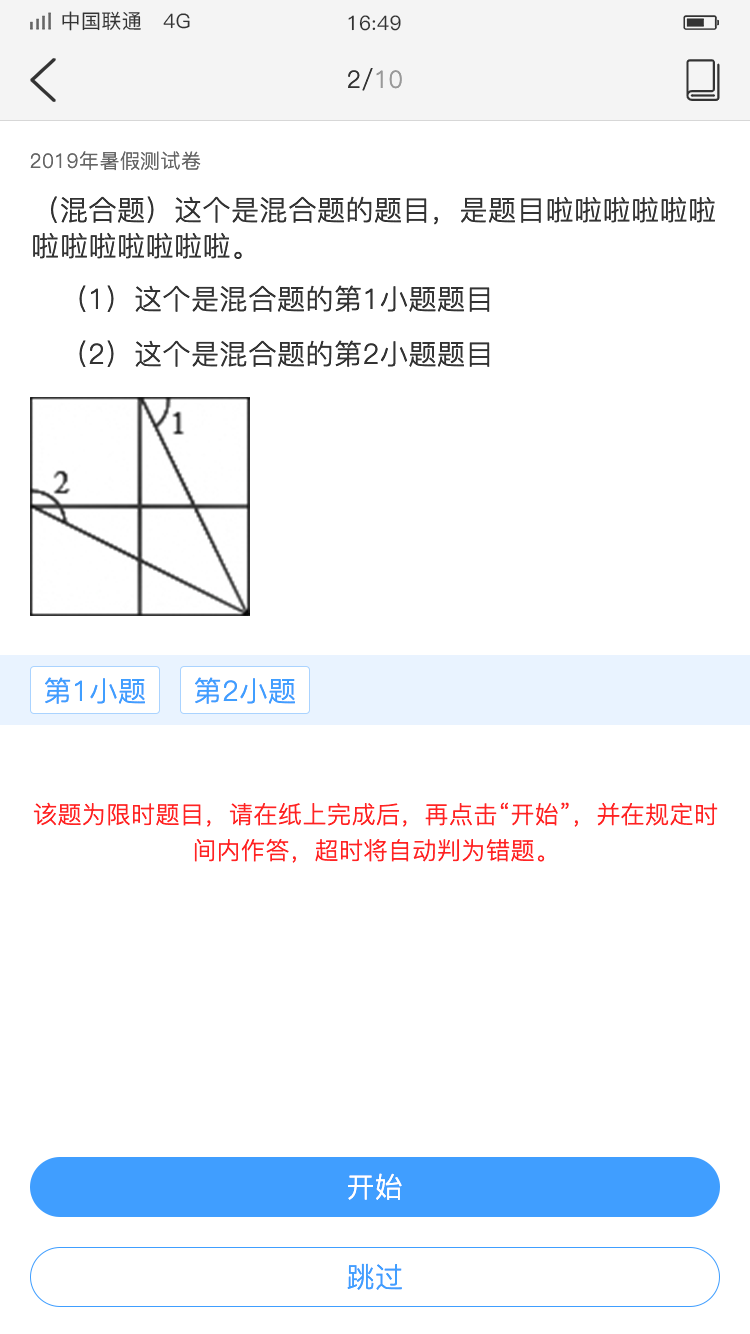
<style>
.page{position:relative;width:750px;height:1334px;background:#ffffff}
.page>*{position:absolute;margin:0}
.t1{font:20px "PingFang-SC-Medium";letter-spacing:0.02em;color:#333333}
.t2{font:24px "PingFang-SC-Regular";letter-spacing:0.02em;color:#333333}
.t3{font:24px "PingFang-SC-Regular";letter-spacing:0.02em;color:#999999}
.t4{font:20px "PingFang-SC-Regular";letter-spacing:0.02em;color:#666666}
.t5{font:28px/36px "PingFang-SC-Regular";letter-spacing:0.02em;color:#333333}
.t6{font:28px "PingFang-SC-Regular";letter-spacing:0.02em;color:#333333}
.t7{font:28px "PingFang-SC-Regular";letter-spacing:0.02em;color:#409eff}
.t8{font:24px/36px "PingFang-SC-Regular";letter-spacing:0.02em;color:#ff2323}
.t9{font:28px "PingFang-SC-Regular";letter-spacing:0.02em;color:#ffffff}
</style>
<div class="page">
<p class="t1" style="left:62px;top:11px;width:128px;height:20px">中国联通   4G</p>
<p class="t1" style="left:348px;top:15px;width:53px;height:16px">16:49</p>
<p class="t2" style="left:348px;top:68px;width:54px;height:23px">2/<span class="t3">10</span></p>
<p class="t4" style="left:30px;top:151px;width:171px;height:20px">2019年暑假测试卷</p>
<p class="t5" style="left:33px;top:196px;width:682px;height:63px">（混合题）这个是混合题的题目，是题目啦啦啦啦啦啦啦啦啦啦啦啦啦。</p>
<p class="t6" style="left:79px;top:285px;width:411px;height:27px">（1）这个是混合题的第1小题题目</p>
<p class="t6" style="left:79px;top:340px;width:411px;height:27px">（2）这个是混合题的第2小题题目</p>
<p class="t7" style="left:45px;top:677px;width:100px;height:27px">第1小题</p>
<p class="t7" style="left:195px;top:677px;width:100px;height:27px">第2小题</p>
<p class="t8" style="left:33px;top:802px;width:685px;height:61px;text-align:center">该题为限时题目，请在纸上完成后，再点击“开始”，并在规定时间内作答，超时将自动判为错题。</p>
<p class="t9" style="left:348px;top:1173px;width:54px;height:27px">开始</p>
<p class="t7" style="left:347px;top:1263px;width:55px;height:27px">跳过</p>
</div>
